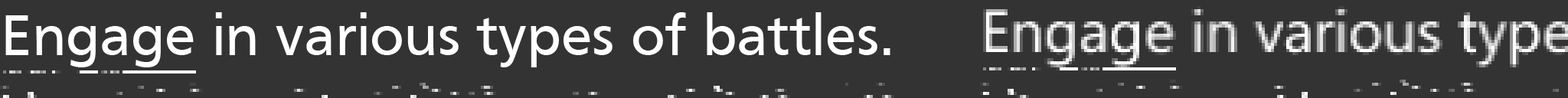
<style>
.page{position:relative;width:1568px;height:98px;background:#333333}
.page>*{position:absolute;margin:0}
.t1{font:59.3px "Frutiger";color:#ffffff}
</style>
<div class="page">
<p class="t1" style="left:5px;top:12px;width:885px;height:55px">Engage in various types of battles.</p>
</div>
